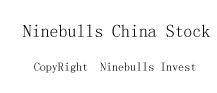
<style>
.page{position:relative;width:217px;height:93px;background:#ffffff}
.page>*{position:absolute;margin:0}
.t1{font:17.8px "SimSun";color:#000000}
.t2{font:12px "SimSun"}
</style>
<div class="page">
<p class="t1" style="left:23px;top:24px;width:187px;height:13px">Ninebulls China Stock</p>
<p class="t2" style="left:34px;top:62px;width:162px;height:11px">CopyRight  Ninebulls Invest</p>
</div>
